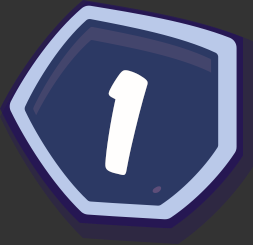
<style>
.page{position:relative;width:253px;height:245px;background:#2c3964}
.page>*{position:absolute;margin:0}
.t1{font:120px "KomikaAxis";color:#fffefd}
</style>
<div class="page">
<p class="t1" style="left:105px;top:70px;width:43px;height:105px">1</p>
</div>
